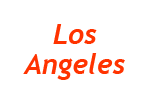
<style>
.page{position:relative;width:150px;height:100px;background:#ffffff}
.page>*{position:absolute;margin:0}
.t1{font:28px/30px "Trebuchet-BoldItalic";color:#ff3300}
</style>
<div class="page">
<p class="t1" style="left:23px;top:24px;width:102px;height:56px;text-align:center">Los<br>Angeles</p>
</div>
